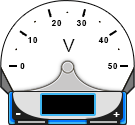
<style>
.page{position:relative;width:135px;height:125px;background:#ffffff}
.page>*{position:absolute;margin:0}
.t1{font:8px "Arial-BoldMT";letter-spacing:0.1em;color:#000000;text-transform:uppercase}
.t2{font:18px "ArialMT";letter-spacing:0.1em;color:#000000;text-transform:uppercase}
.t3{font:21.3px "Candara-Bold";letter-spacing:0.2em;color:#ffffff;text-transform:uppercase}
.t4{font:14.1px "Candara-Bold";letter-spacing:0.2em;color:#ffffff;text-transform:uppercase}
</style>
<div class="page">
<p class="t1" style="left:51px;top:20px;width:11px;height:6px">20</p>
<p class="t1" style="left:76px;top:20px;width:11px;height:6px">30</p>
<p class="t1" style="left:28px;top:37px;width:10px;height:6px">10</p>
<p class="t2" style="left:62px;top:39px;width:13px;height:13px">v</p>
<p class="t1" style="left:98px;top:37px;width:11px;height:6px">40</p>
<p class="t1" style="left:20px;top:63px;width:5px;height:6px">0</p>
<p class="t1" style="left:108px;top:63px;width:10px;height:6px">50</p>
<p class="t3" style="left:16px;top:113px;width:5px;height:2px">-</p>
<p class="t4" style="left:113px;top:112px;width:7px;height:5px">+</p>
</div>
